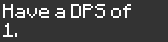
<style>
.page{position:relative;width:168px;height:42px;background:#333333}
.page>*{position:absolute;margin:0}
.t1{font:16px "Minecraftia-Regular";color:#ffffff}
</style>
<div class="page">
<p class="t1" style="left:3px;top:4px;width:128px;height:33px">Have a DPS of<br>1.</p>
</div>
